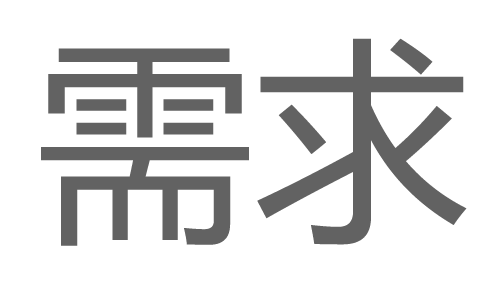
<style>
.page{position:relative;width:500px;height:300px;background:#ffffff}
.page>*{position:absolute;margin:0}
.t1{font:216px "MicrosoftYaHei";color:#626262}
</style>
<div class="page">
<p class="t1" style="left:41px;top:38px;width:426px;height:208px">需求</p>
</div>
